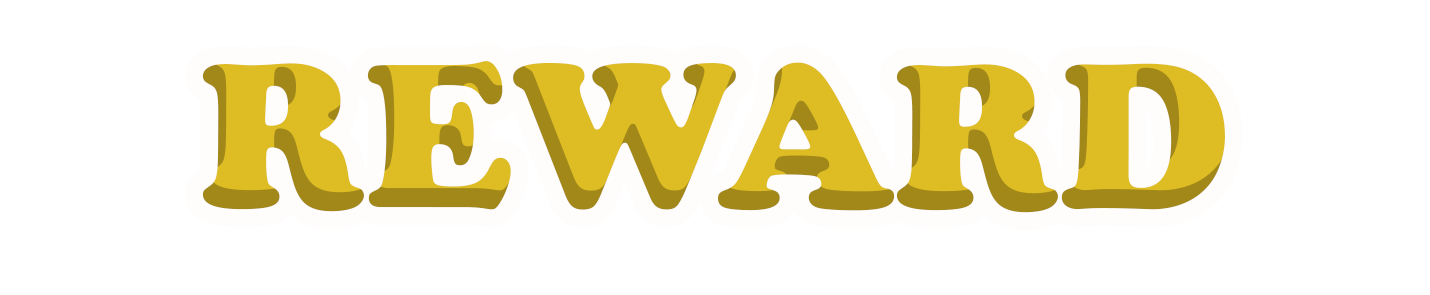
<style>
.page{position:relative;width:1430px;height:295px;background:#ffffff}
.page>*{position:absolute;margin:0}
.t1{font:213px "CooperBlack";color:#debd24}
</style>
<div class="page">
<p class="t1" style="left:202px;top:61px;width:1023px;height:152px">REWARD</p>
</div>
